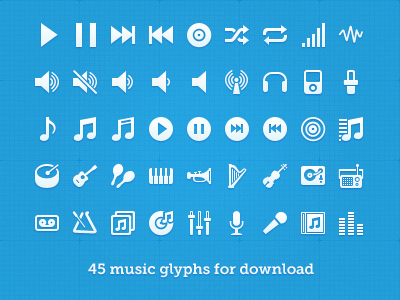
<style>
.page{position:relative;width:400px;height:300px}
.page>*{position:absolute;margin:0}
.t1{font:15px "MuseoSlab-700";color:#ffffff}
</style>
<div class="page">
<p class="t1" style="left:88px;top:263px;width:226px;height:15px">45 music glyphs for download</p>
</div>
